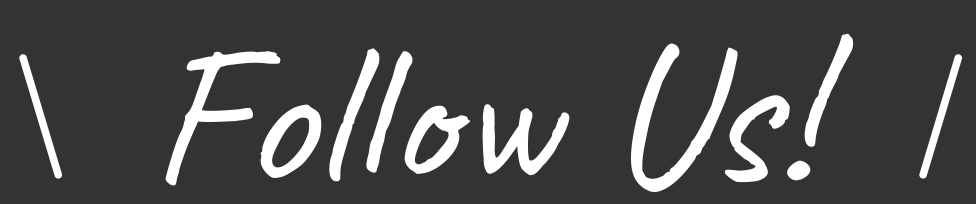
<style>
.page{position:relative;width:976px;height:204px;background:#333333}
.page>*{position:absolute;margin:0}
.t1{font:202.7px "Caveat-Regular";color:#ffffff}
</style>
<div class="page">
<p class="t1" style="left:165px;top:33px;width:689px;height:159px">Follow Us!</p>
</div>
